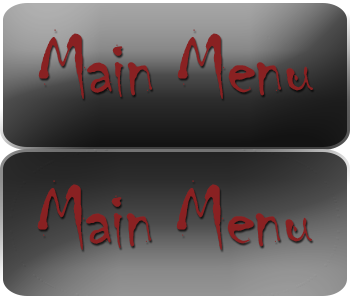
<style>
.page{position:relative;width:350px;height:300px}
.page>*{position:absolute;margin:0}
.t1{font:89.9px "Chiller-Regular";letter-spacing:-0.025em;color:#892122}
</style>
<div class="page">
<p class="t1" style="left:38px;top:29px;width:275px;height:70px">Main Menu</p>
<p class="t1" style="left:37px;top:180px;width:275px;height:70px">Main Menu</p>
</div>
